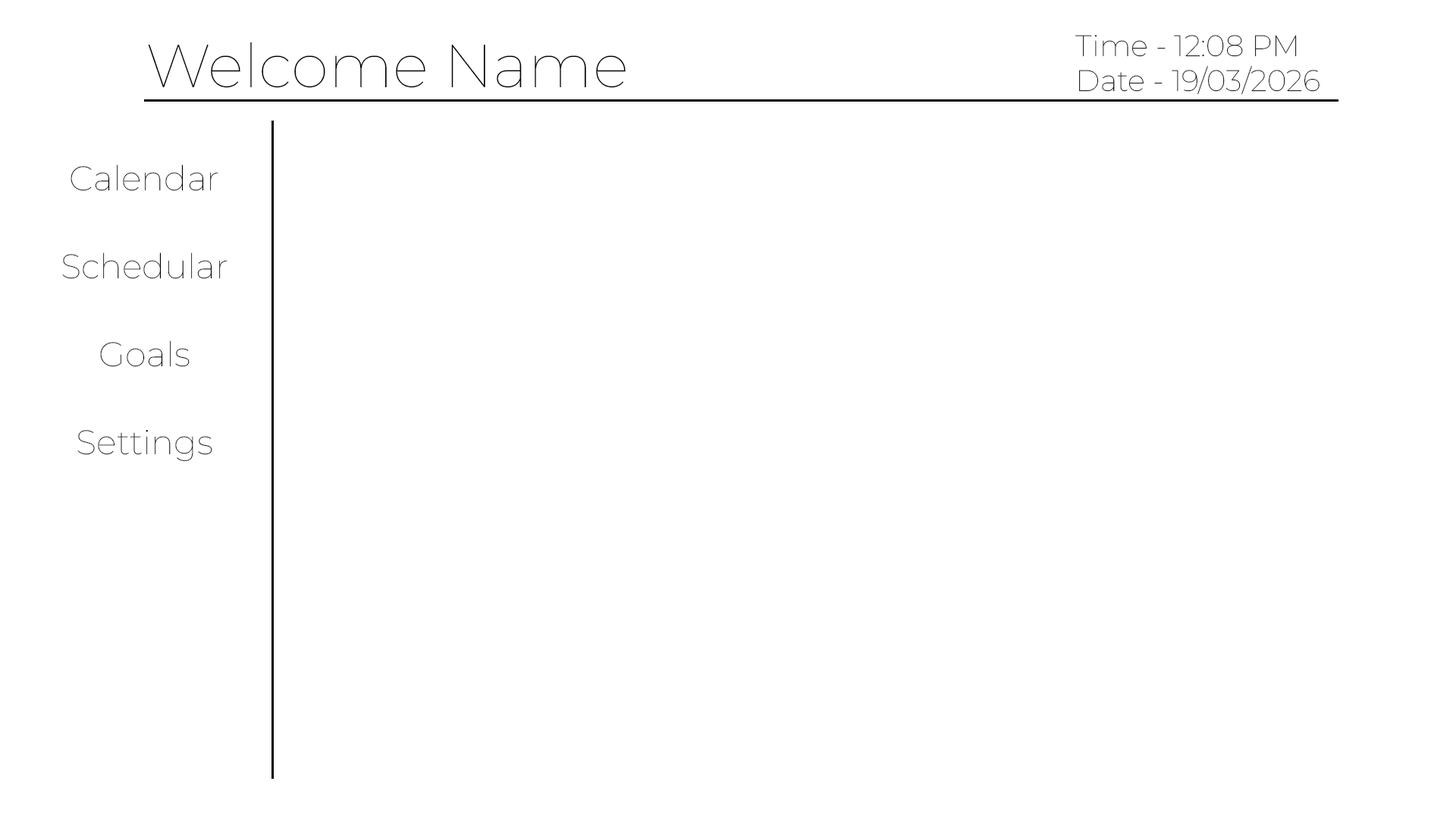
<style>
.page{position:relative;width:1456px;height:819px;background:#ffffff}
.page>*{position:absolute;margin:0}
.t1{font:60.7px "Montserrat-Thin";color:#000000}
.t2{font:29.6px "Montserrat-Thin";color:#000000}
.t3{font:34.1px/88px "Montserrat-Thin";color:#000000}
</style>
<div class="page">
<p class="t1" style="left:148px;top:42px;width:478px;height:46px">Welcome Name</p>
<p class="t2" style="left:1075px;top:35px;width:244px;height:60px">Time - 12:08 PM<br>Date - 19/03/2026</p>
<p class="t3" style="left:62px;top:165px;width:165px;height:296px;text-align:center">Calendar<br>Schedular<br>Goals<br>Settings</p>
</div>
